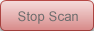
<style>
.page{position:relative;width:94px;height:31px}
.page>*{position:absolute;margin:0}
.t1{font:13.3px "ArialMT";color:#6e6e6e}
</style>
<div class="page">
<p class="t1" style="left:18px;top:11px;width:60px;height:13px">Stop Scan</p>
</div>
